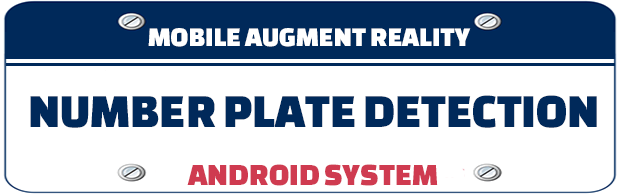
<style>
.page{position:relative;width:620px;height:194px;background:#ffffff}
.page>*{position:absolute;margin:0}
.t1{font:28px "ChangaOne-Regular";color:#ffffff}
.t2{font:49.3px "ChangaOne-Regular";color:#00295a}
.t3{font:32px "ChangaOne-Regular";color:#cf3b50}
</style>
<div class="page">
<p class="t1" style="left:148px;top:28px;width:323px;height:19px">MOBILE AUGMENT REALITY</p>
<p class="t2" style="left:30px;top:95px;width:567px;height:33px">NUMBER PLATE DETECTION</p>
<p class="t3" style="left:187px;top:164px;width:251px;height:22px">ANDROID SYSTEM</p>
</div>
